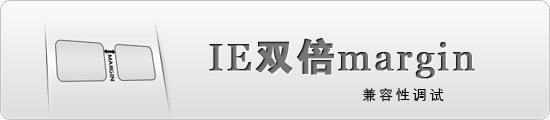
<style>
.page{position:relative;width:550px;height:120px}
.page>*{position:absolute;margin:0}
.t1{font:38.4px "Georgia";letter-spacing:0.05em;font-weight:bold}
.t2{font:38.4px "FZDHTJW--GB1-0";letter-spacing:0.05em;font-weight:bold}
.t3{font:14px "STXihei";letter-spacing:0.2em;color:#000000}
</style>
<div class="page">
<p class="t1" style="left:209px;top:38px;width:266px;height:41px">IE<span class="t2">双倍</span>margin</p>
<p class="t3" style="left:363px;top:88px;width:81px;height:14px">兼容性调试</p>
</div>
